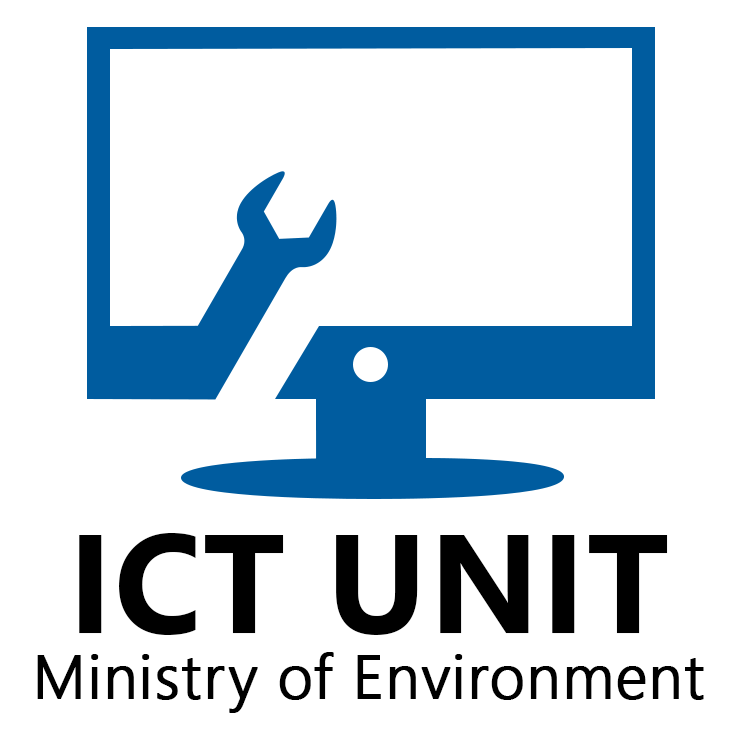
<style>
.page{position:relative;width:740px;height:740px;background:#ffffff}
.page>*{position:absolute;margin:0}
.t1{font:60.7px "NirmalaUI-Semilight";letter-spacing:0.01em;color:#000000;font-weight:bold}
.t2{font:140px "NirmalaUI-Bold";letter-spacing:0.01em;color:#000000}
</style>
<div class="page">
<p class="t1" style="left:37px;top:533px;width:667px;height:180px;text-align:center"><span class="t2">ICT UNIT<br></span>Ministry of Environment</p>
</div>
